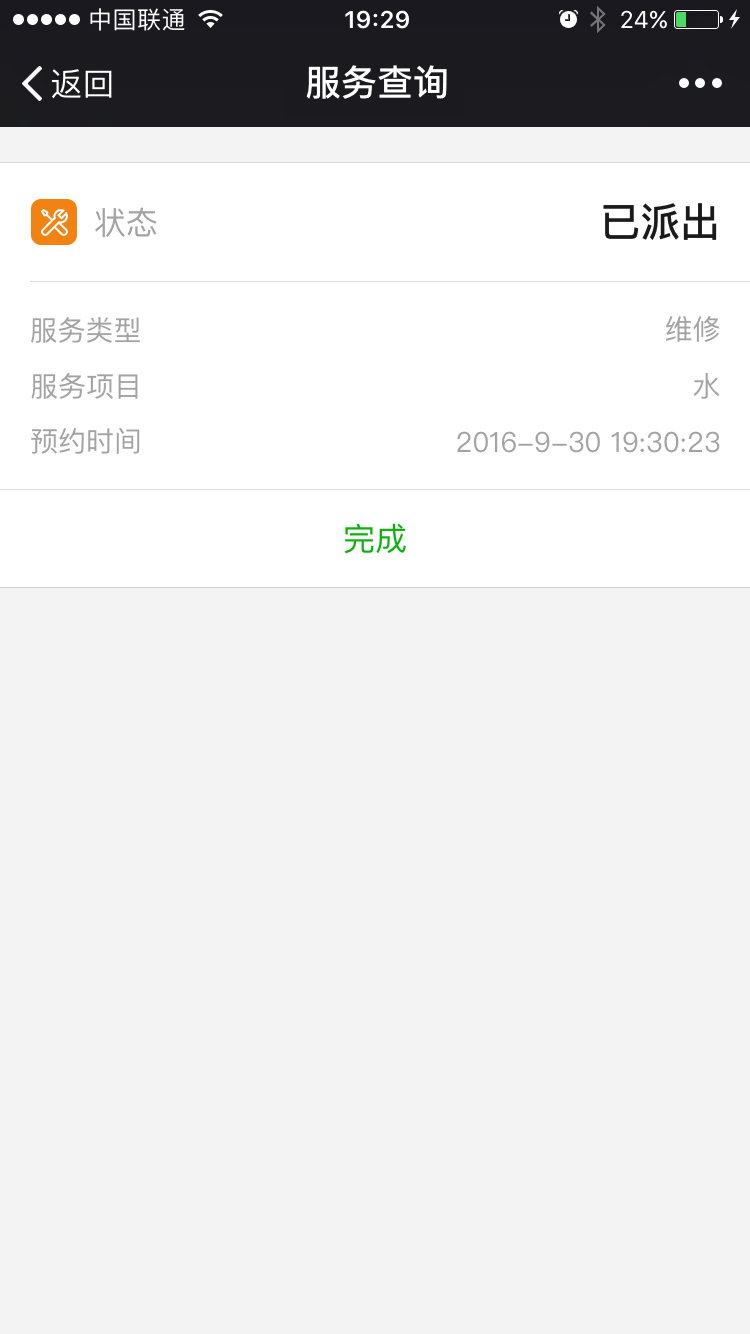
<style>
.page{position:relative;width:750px;height:1334px;background:#f3f3f3}
.page>*{position:absolute;margin:0}
.t1{font:36px "PingFangSC-Medium";color:#ffffff}
.t2{font:32px "PingFangSC-Regular";color:#a3a3a3}
.t3{font:40px "PingFangSC-Medium";color:#1a1a1a}
.t4{font:28px "PingFangSC-Regular";color:#a3a3a3}
.t5{font:32px "PingFangSC-Regular";color:#0bb20c}
</style>
<div class="page">
<p class="t1" style="left:306px;top:65px;width:141px;height:34px">服务查询</p>
<p class="t2" style="left:95px;top:207px;width:62px;height:31px">状态</p>
<p class="t3" style="left:603px;top:203px;width:114px;height:37px">已派出</p>
<p class="t4" style="left:31px;top:317px;width:109px;height:26px">服务类型</p>
<p class="t4" style="left:665px;top:316px;width:55px;height:26px">维修</p>
<p class="t4" style="left:31px;top:373px;width:107px;height:26px">服务项目</p>
<p class="t4" style="left:693px;top:373px;width:27px;height:26px">水</p>
<p class="t4" style="left:31px;top:428px;width:109px;height:26px">预约时间</p>
<p class="t4" style="left:457px;top:431px;width:263px;height:22px">2016-9-30 19:30:23</p>
<p class="t5" style="left:344px;top:523px;width:62px;height:31px">完成</p>
</div>
